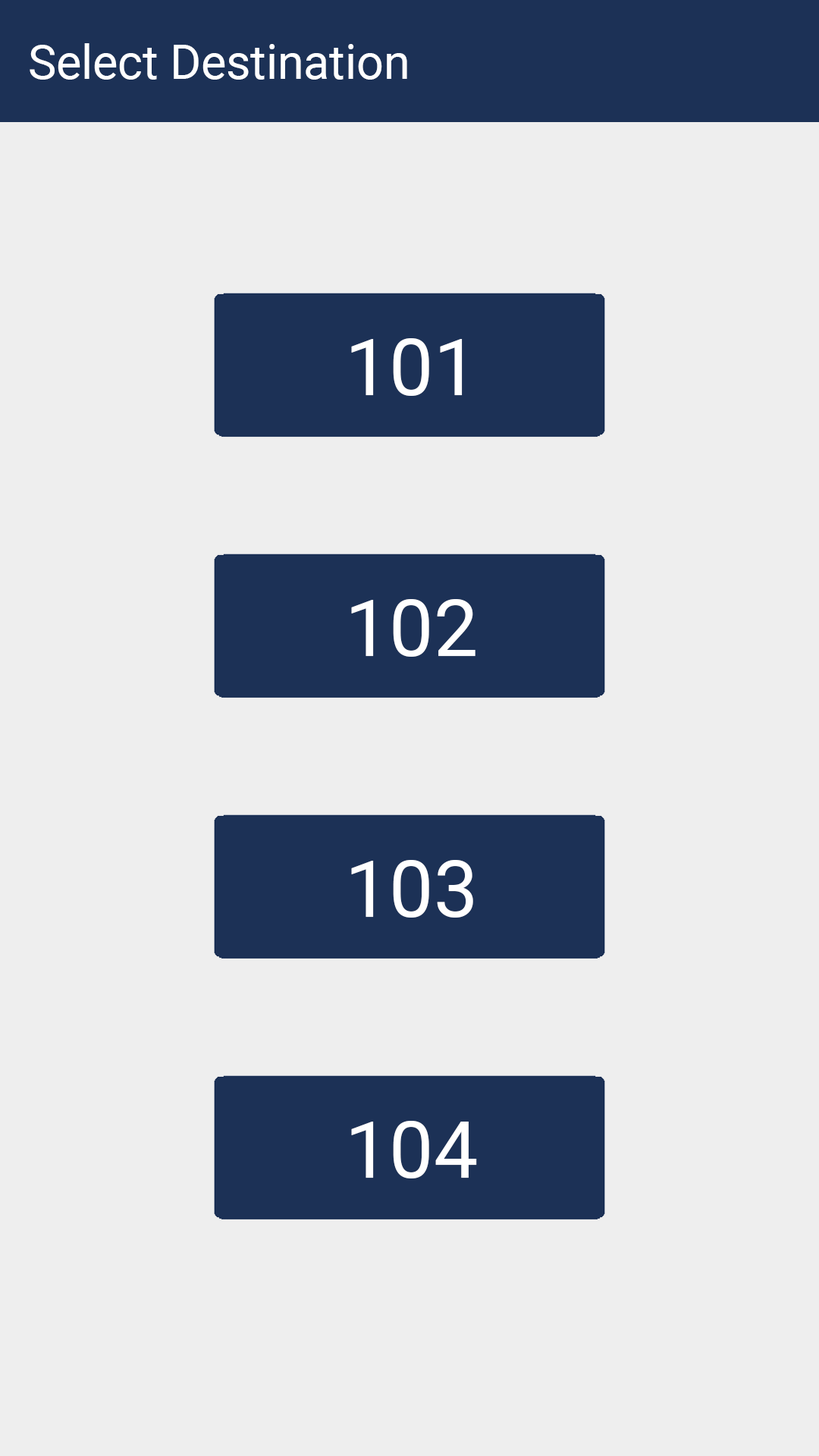
<style>
.page{position:relative;width:819px;height:1456px;background:#eeeeee}
.page>*{position:absolute;margin:0}
.t1{font:47.4px "Roboto-Regular";color:#ffffff}
.t2{font:79px "Roboto-Regular";color:#ffffff}
</style>
<div class="page">
<p class="t1" style="left:30px;top:43px;width:377px;height:37px">Select Destination</p>
<p class="t2" style="left:351px;top:338px;width:112px;height:58px">101</p>
<p class="t2" style="left:351px;top:599px;width:124px;height:58px">102</p>
<p class="t2" style="left:351px;top:860px;width:122px;height:58px">103</p>
<p class="t2" style="left:351px;top:1121px;width:126px;height:57px">104</p>
</div>
